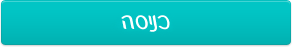
<style>
.page{position:relative;width:292px;height:47px}
.page>*{position:absolute;margin:0}
.t1{font:35px "DGLBilbiBold";color:#ffffff}
</style>
<div class="page">
<p class="t1" style="left:121px;top:15px;width:49px;height:17px">הסינכ</p>
</div>
